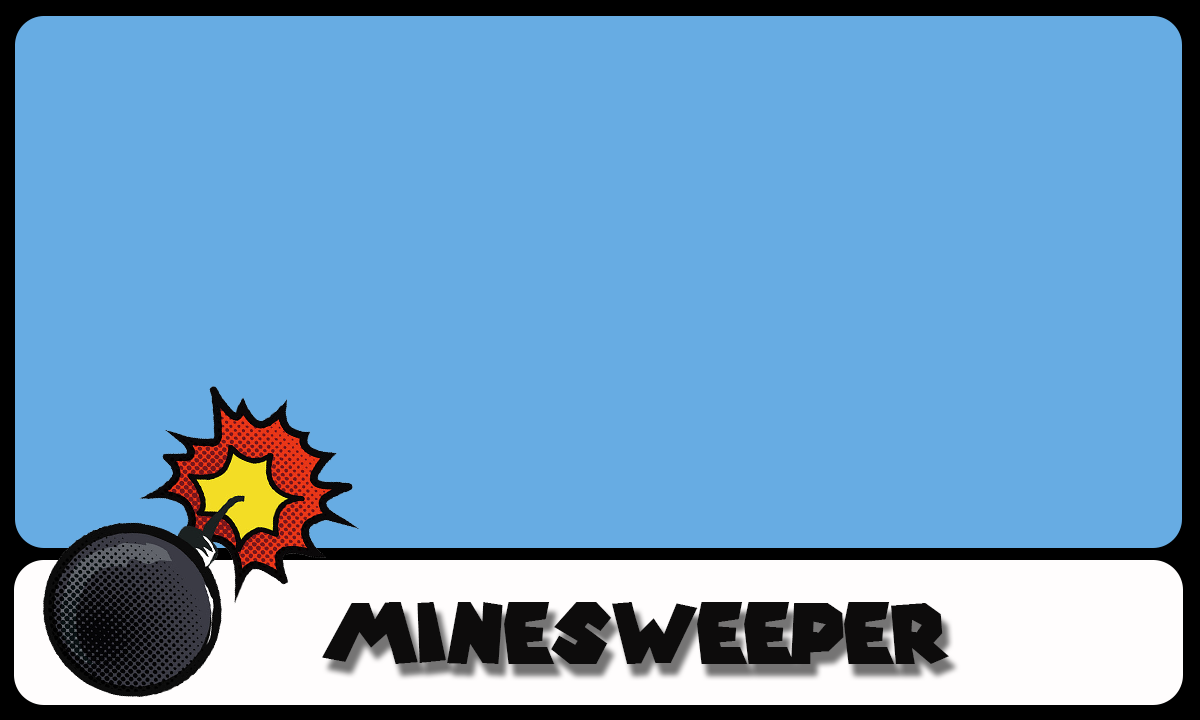
<style>
.page{position:relative;width:1200px;height:720px;background:#67ace3}
.page>*{position:absolute;margin:0}
.t1{font:82.5px "SuperMarioGalaxy";color:#0d0c0c}
</style>
<div class="page">
<p class="t1" style="left:322px;top:602px;width:627px;height:62px">Minesweeper</p>
</div>
